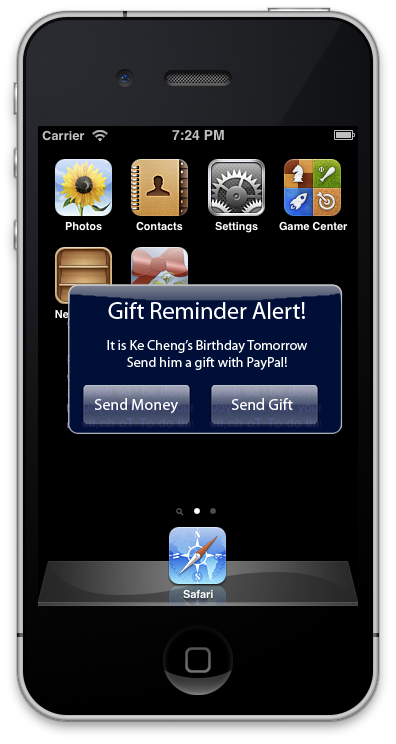
<style>
.page{position:relative;width:396px;height:744px;background:#000000}
.page>*{position:absolute;margin:0}
.t1{font:14px "MyriadPro-Regular";color:#ffffff}
.t2{font:24px "MyriadPro-Regular";color:#ffffff}
.t3{font:16px "MyriadPro-Regular";color:#ffffff}
</style>
<div class="page">
<p class="t1" style="left:107px;top:302px;width:200px;height:68px;text-align:center"><span class="t2">Gift Reminder Alert!<br><br></span>It is Ke Cheng’s Birthday Tomorrow<br>Send him a gift with PayPal!</p>
<p class="t3" style="left:94px;top:398px;width:84px;height:16px">Send Money</p>
<p class="t3" style="left:231px;top:398px;width:62px;height:12px">Send Gift</p>
</div>
